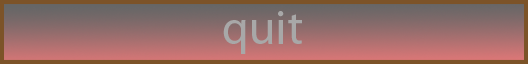
<style>
.page{position:relative;width:528px;height:64px}
.page>*{position:absolute;margin:0}
.t1{font:48px "MyriadPro-Regular";color:#a8a8a8}
</style>
<div class="page">
<p class="t1" style="left:223px;top:11px;width:79px;height:43px">quit</p>
</div>
